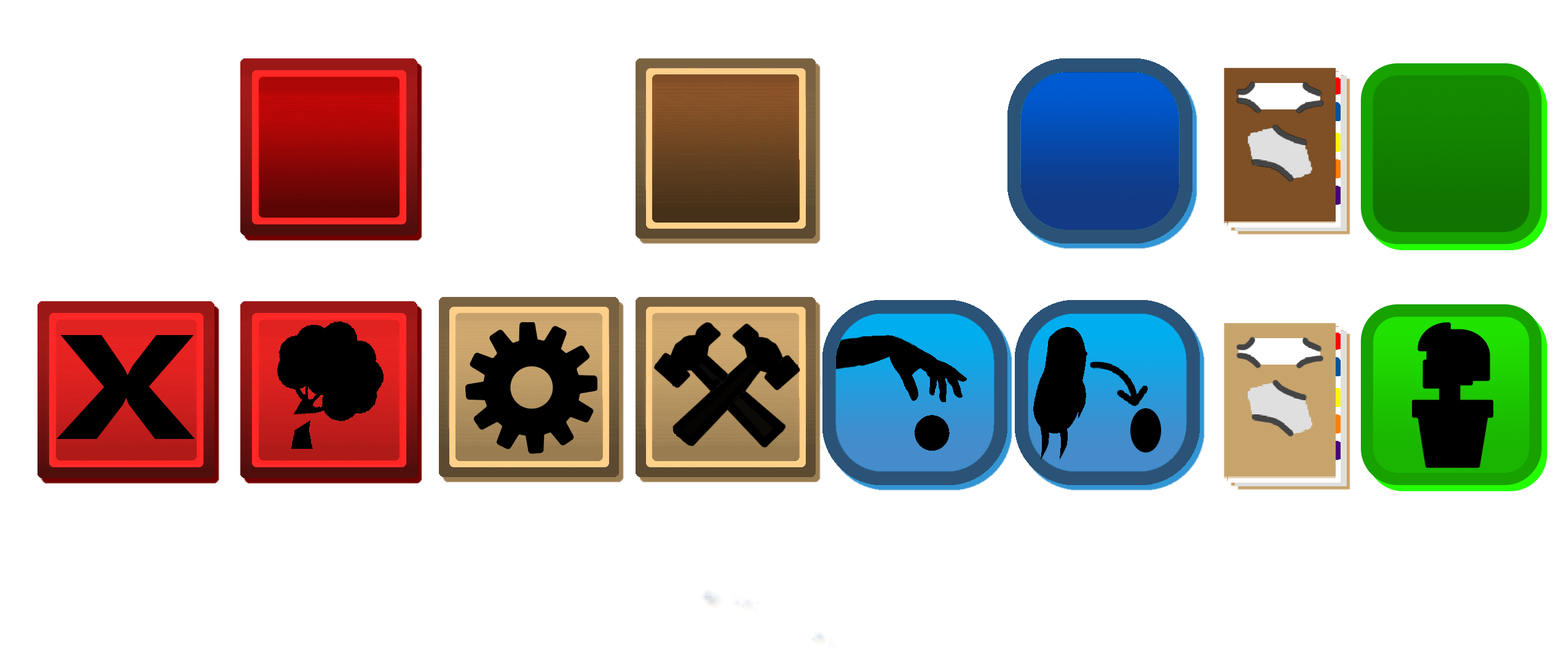
<style>
.page{position:relative;width:1568px;height:664px;background:#ffffff}
.page>*{position:absolute;margin:0}
.t1{font:148.2px "MyanmarText-Bold";color:#000000;scale:1.44 1}
</style>
<div class="page">
<p class="t1" style="left:57px;top:335px;width:138px;height:104px">X</p>
</div>
